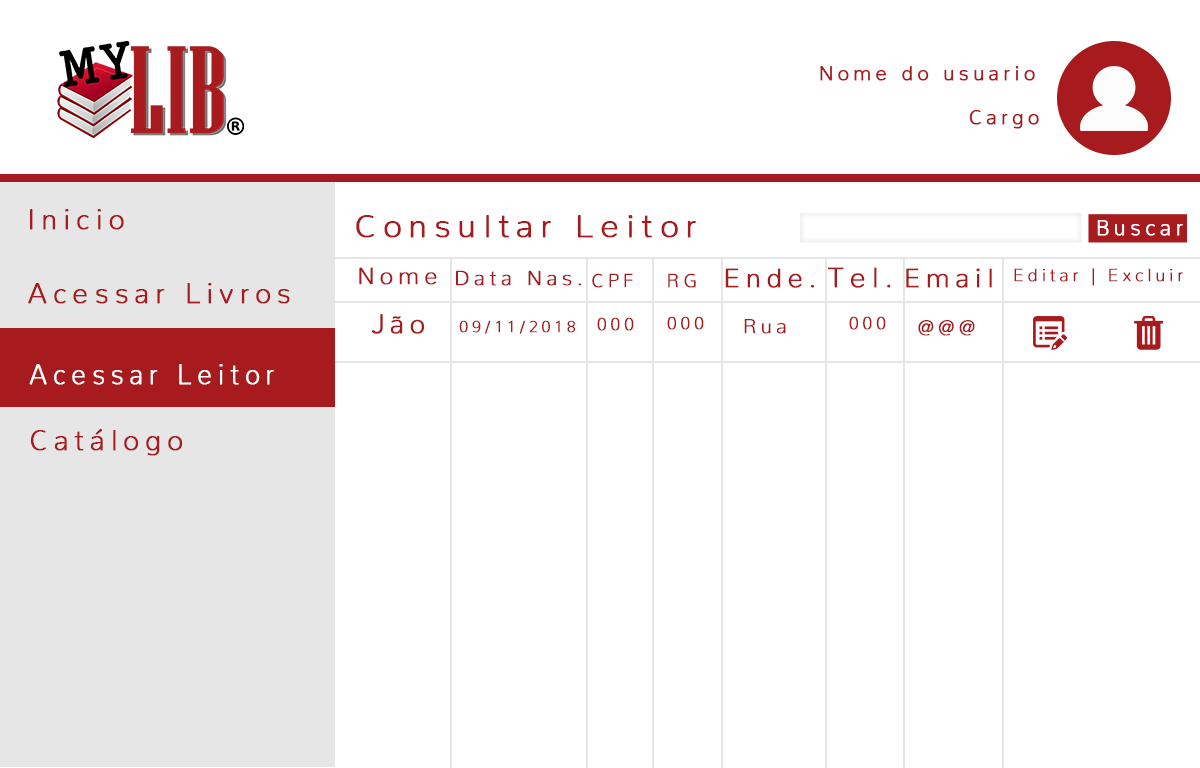
<style>
.page{position:relative;width:1200px;height:768px;background:#ffffff}
.page>*{position:absolute;margin:0}
.t1{font:20px "Nunito-ExtraLight";letter-spacing:0.2em;color:#a71b1e;font-weight:bold}
.t2{font:28px "Nunito-ExtraLight";letter-spacing:0.2em;color:#a71b1e;font-weight:bold}
.t3{font:32.7px "Nunito-ExtraLight";letter-spacing:0.2em;color:#a71b1e;font-weight:bold}
.t4{font:21.3px "Nunito-ExtraLight";letter-spacing:0.2em;color:#fdfdfd;font-weight:bold}
.t5{font:23.6px "Nunito-ExtraLight";letter-spacing:0.2em;color:#a71b1e;font-weight:bold}
.t6{font:20.8px "Nunito-ExtraLight";letter-spacing:0.2em;color:#a71b1e;font-weight:bold}
.t7{font:26.8px "Nunito-ExtraLight";letter-spacing:0.2em;color:#a71b1e;font-weight:bold}
.t8{font:28.1px "Nunito-ExtraLight";letter-spacing:0.2em;color:#a71b1e;font-weight:bold}
.t9{font:26.5px "Nunito-ExtraLight";letter-spacing:0.2em;color:#a71b1e;font-weight:bold}
.t10{font:17.5px "Nunito-ExtraLight";letter-spacing:0.2em;color:#a71b1e;font-weight:bold}
.t11{font:19.1px "Nunito-ExtraLight";letter-spacing:0.2em;color:#a71b1e;font-weight:bold}
.t12{font:27px "Nunito-ExtraLight";letter-spacing:0.2em;color:#a71b1e;font-weight:bold}
.t13{font:16.3px "Nunito-ExtraLight";letter-spacing:0.2em;color:#a71b1e;font-weight:bold}
.t14{font:20.3px "Nunito-ExtraLight";letter-spacing:0.2em;color:#a71b1e;font-weight:bold}
.t15{font:20.1px "Nunito-ExtraLight";letter-spacing:0.2em;color:#a71b1e;font-weight:bold}
.t16{font:28px "Nunito-ExtraLight";letter-spacing:0.2em;color:#ffffff;font-weight:bold;scale:0.94 1}
</style>
<div class="page">
<p class="t1" style="left:820px;top:66px;width:215px;height:15px">Nome do usuario</p>
<p class="t1" style="left:969px;top:110px;width:70px;height:19px">Cargo</p>
<p class="t2" style="left:30px;top:209px;width:94px;height:21px">Inicio</p>
<p class="t3" style="left:356px;top:215px;width:340px;height:23px">Consultar Leitor</p>
<p class="t4" style="left:1097px;top:220px;width:86px;height:16px">Buscar</p>
<p class="t5" style="left:359px;top:267px;width:78px;height:18px">Nome</p>
<p class="t6" style="left:456px;top:270px;width:125px;height:16px">Data Nas.</p>
<p class="t7" style="left:725px;top:268px;width:89px;height:20px">Ende.</p>
<p class="t8" style="left:828px;top:267px;width:63px;height:21px">Tel.</p>
<p class="t9" style="left:906px;top:268px;width:86px;height:20px">Email</p>
<p class="t10" style="left:1014px;top:268px;width:169px;height:18px">Editar | Excluir</p>
<p class="t11" style="left:592px;top:273px;width:41px;height:15px">CPF</p>
<p class="t11" style="left:668px;top:273px;width:28px;height:15px">RG</p>
<p class="t2" style="left:28px;top:283px;width:262px;height:21px">Acessar Livros</p>
<p class="t12" style="left:372px;top:314px;width:52px;height:20px">Jão</p>
<p class="t10" style="left:597px;top:317px;width:37px;height:14px">000</p>
<p class="t10" style="left:667px;top:316px;width:37px;height:14px">000</p>
<p class="t10" style="left:849px;top:316px;width:37px;height:14px">000</p>
<p class="t13" style="left:459px;top:320px;width:116px;height:14px">09/11/2018</p>
<p class="t14" style="left:744px;top:319px;width:42px;height:15px">Rua</p>
<p class="t15" style="left:918px;top:320px;width:57px;height:16px">@@@</p>
<p class="t16" style="left:29px;top:364px;width:245px;height:21px">Acessar Leitor</p>
<p class="t2" style="left:30px;top:429px;width:153px;height:27px">Catálogo</p>
</div>
